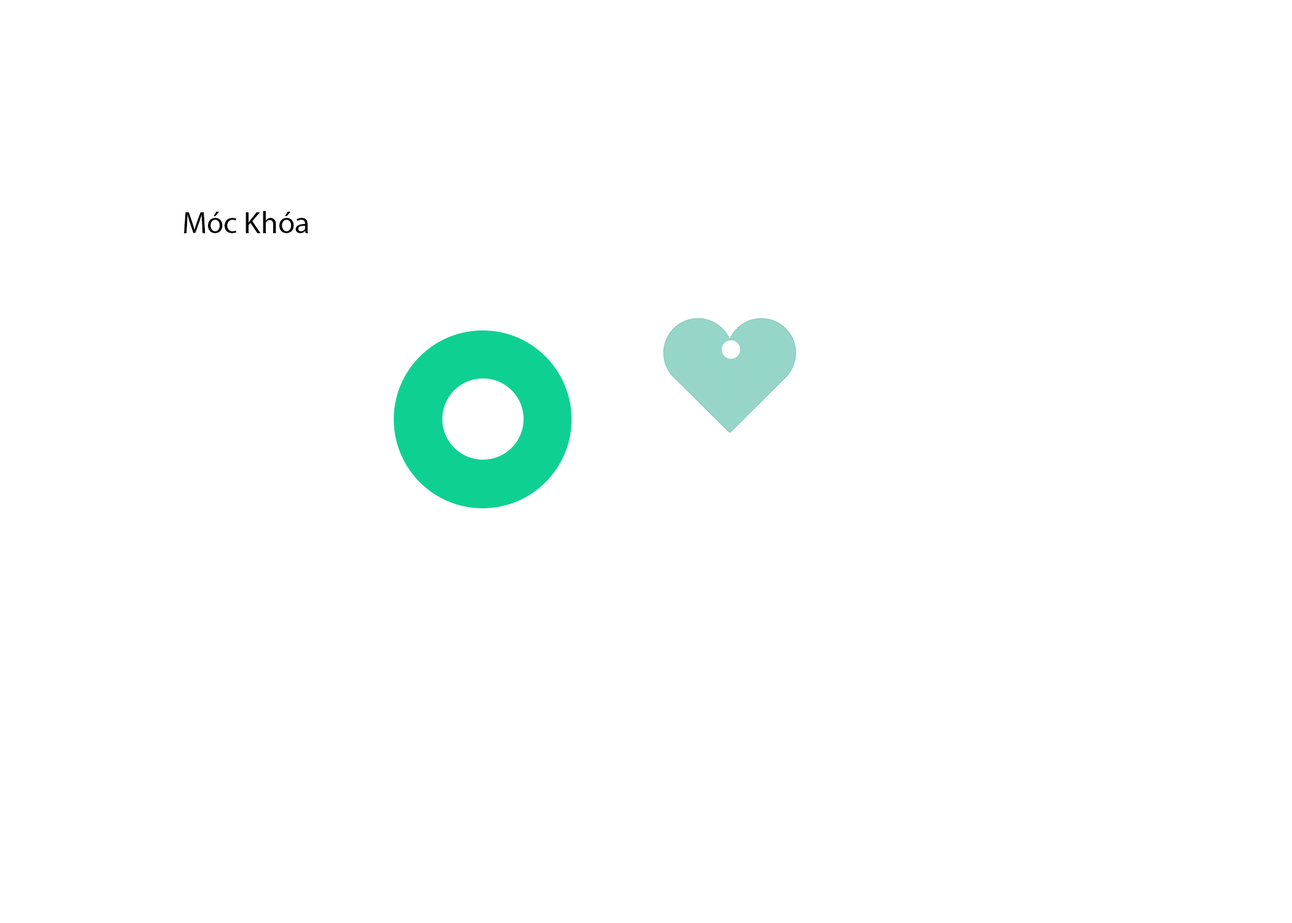
<style>
.page{position:relative;width:1292px;height:923px;background:#ffffff}
.page>*{position:absolute;margin:0}
.t1{font:30.8px "MyriadPro-Regular";color:#000000}
</style>
<div class="page">
<p class="t1" style="left:184px;top:211px;width:124px;height:22px">Móc Khóa</p>
</div>
